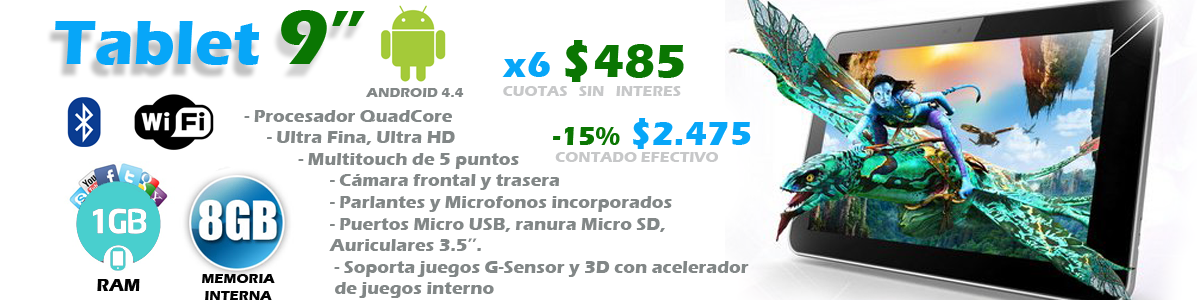
<style>
.page{position:relative;width:1200px;height:300px;background:#ffffff}
.page>*{position:absolute;margin:0}
.t1{font:78.7px "ErasITC-Bold";color:#0a7602}
.t2{font:63.8px "ErasITC-Bold";color:#07a6f8}
.t3{font:48px "ErasITC-Bold";color:#0a7602}
.t4{font:37.5px "ErasITC-Bold";color:#07a6f8}
.t5{font:14px "ErasITC-Bold";color:#828787}
.t6{font:15px "ErasITC-Bold";color:#c7c8c9}
.t7{font:18px "ErasITC-Bold";color:#828787}
.t8{font:34.5px "ErasITC-Bold";color:#07a6f8}
.t9{font:26.9px "ErasITC-Bold";color:#0a7602}
.t10{font:18px "ErasITC-Bold";color:#030303}
.t11{font:14px "ErasITC-Bold";color:#030303}
</style>
<div class="page">
<p class="t1" style="left:281px;top:10px;width:84px;height:54px">9”</p>
<p class="t2" style="left:55px;top:21px;width:205px;height:44px">Tablet</p>
<p class="t3" style="left:565px;top:40px;width:119px;height:42px">$485</p>
<p class="t4" style="left:502px;top:52px;width:48px;height:25px">x6</p>
<p class="t5" style="left:366px;top:88px;width:98px;height:9px">ANDROID 4.4</p>
<p class="t6" style="left:503px;top:86px;width:178px;height:10px">CUOTAS   SIN   INTERES</p>
<p class="t7" style="left:244px;top:110px;width:505px;height:188px">- Procesador QuadCore<br>     - Ultra Fina, Ultra HD<br>            - Multitouch de 5 puntos<br>                   - Cámara frontal y trasera<br>                   - Parlantes y Microfonos incorporados<br>                   - Puertos Micro USB, ranura Micro SD,<br>                   Auriculares 3.5’’.<br>                    - Soporta juegos G-Sensor y 3D con acelerador<br>                    de juegos interno</p>
<p class="t8" style="left:633px;top:118px;width:118px;height:31px">$2.475</p>
<p class="t9" style="left:553px;top:127px;width:67px;height:18px">-15%</p>
<p class="t6" style="left:555px;top:152px;width:163px;height:10px">CONTADO EFECTIVO</p>
<p class="t10" style="left:97px;top:279px;width:43px;height:12px">RAM</p>
<p class="t11" style="left:202px;top:274px;width:73px;height:26px;text-align:center">MEMORIA<br>INTERNA</p>
</div>
